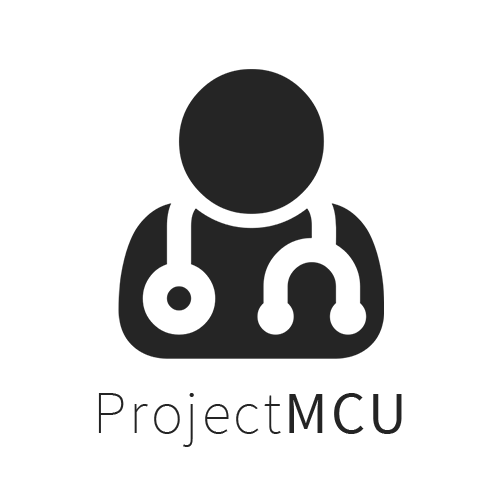
<style>
.page{position:relative;width:500px;height:500px;background:#ffffff}
.page>*{position:absolute;margin:0}
.t1{font:60px "SourceSansPro-ExtraLight";letter-spacing:0.05em;color:#242424}
.t2{font:60px "SourceSansPro-Regular";letter-spacing:0.05em;color:#242424}
</style>
<div class="page">
<p class="t1" style="left:98px;top:393px;width:304px;height:54px">Project<span class="t2">MCU</span></p>
</div>
